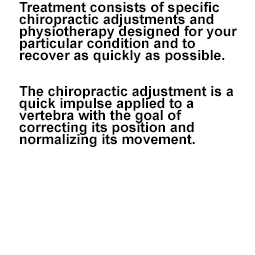
<style>
.page{position:relative;width:255px;height:255px;background:#ffffff}
.page>*{position:absolute;margin:0}
.t1{font:14px/12px "Arial-BoldMT";color:#000000}
</style>
<div class="page">
<p class="t1" style="left:19px;top:1px;width:218px;height:146px">Treatment consists of specific <br>chiropractic adjustments and <br>physiotherapy designed for your <br>particular condition and to <br>recover as quickly as possible.<br><br><br>The chiropractic adjustment is a quick impulse applied to a <br>vertebra with the goal of <br>correcting its position and <br>normalizing its movement.</p>
</div>
